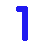
<style>
.page{position:relative;width:48px;height:48px;background:#ffffff}
.page>*{position:absolute;margin:0}
.t1{font:48px "ElementaryHeavySFBold";color:#201af1}
</style>
<div class="page">
<p class="t1" style="left:16px;top:6px;width:12px;height:35px">1</p>
</div>
